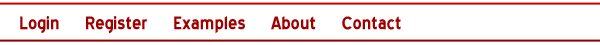
<style>
.page{position:relative;width:600px;height:45px;background:#ffffff}
.page>*{position:absolute;margin:0}
.t1{font:22px "BlueHighway-Bold";color:#a00000}
</style>
<div class="page">
<p class="t1" style="left:20px;top:16px;width:381px;height:18px">Login     Register     Examples     About     Contact</p>
</div>
